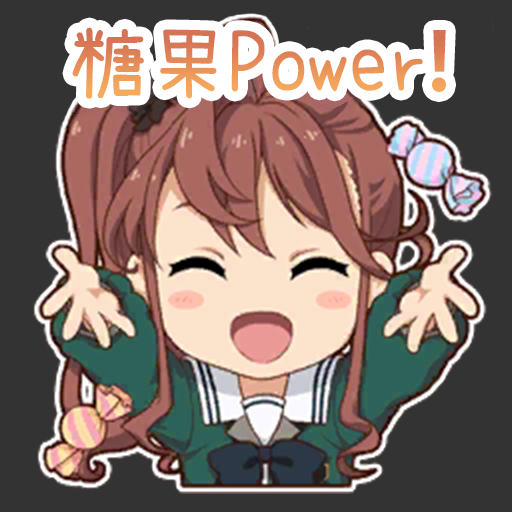
<style>
.page{position:relative;width:512px;height:512px;background:#333333}
.page>*{position:absolute;margin:0}
.t1{font:79.9px "SetoFont"}
.t2{font:79.9px "AdobeGothicStd-Bold"}
</style>
<div class="page">
<p class="t1" style="left:72px;top:27px;width:374px;height:72px">糖果Power<span class="t2">!</span></p>
</div>
